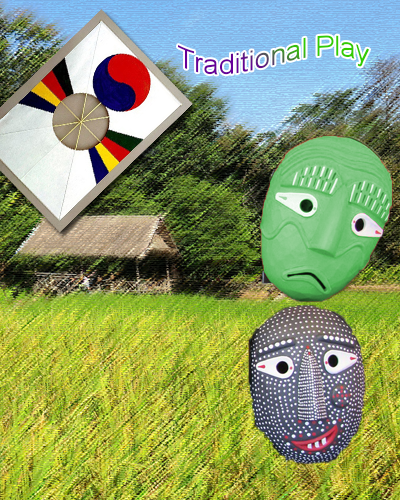
<style>
.page{position:relative;width:400px;height:500px}
.page>*{position:absolute;margin:0}
.t1{font:27.9px "ArialMT"}
</style>
<div class="page">
<p class="t1" style="left:178px;top:35px;width:192px;height:40px">Traditional Play</p>
</div>
